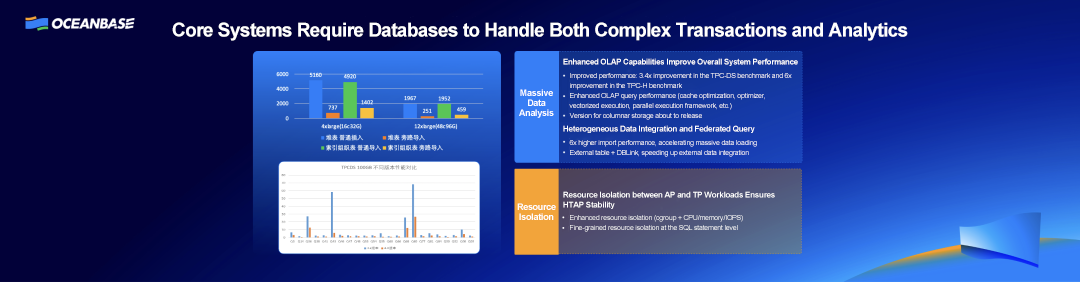
<style>
.page{position:relative;width:1080px;height:282px;background:#020139}
.page>*{position:absolute;margin:0}
.t1{font:19px "Arial-BoldMT";letter-spacing:-0.03em;color:#ffffff}
.t2{font:8px "Arial-BoldMT";letter-spacing:-0.03em;color:#ffffff}
.t3{font:7px/10px "ArialMT";letter-spacing:-0.03em}
.t4{font:9px/10px "Arial-BoldMT";letter-spacing:-0.03em;color:#ffffff}
.t5{font:8px/10px "Arial-BoldMT";letter-spacing:-0.03em;color:#ffffff}
</style>
<div class="page">
<p class="t1" style="left:172px;top:22px;width:736px;height:19px">Core Systems Require Databases to Handle Both Complex Transactions and Analytics</p>
<p class="t2" style="left:563px;top:58px;width:235px;height:8px">Enhanced OLAP Capabilities Improve Overall System Performance</p>
<p class="t3" style="left:569px;top:73px;width:223px;height:47px">Improved performance: 3.4x improvement in the TPC-DS benchmark and 6x improvement in the TPC-H benchmark<br>Enhanced OLAP query performance (cache optimization, optimizer, vectorized execution, parallel execution framework, etc.)<br>Version for columnar storage about to release</p>
<p class="t4" style="left:519px;top:89px;width:35px;height:29px;text-align:center">Massive Data Analysis</p>
<p class="t2" style="left:563px;top:125px;width:192px;height:8px">Heterogeneous Data Integration and Federated Query</p>
<p class="t3" style="left:569px;top:140px;width:188px;height:17px">6x higher import performance, accelerating massive data loading<br>External table + DBLink, speeding up external data integration</p>
<p class="t5" style="left:563px;top:191px;width:212px;height:18px">Resource Isolation between AP and TP Workloads Ensures <br>HTAP Stability</p>
<p class="t4" style="left:517px;top:203px;width:39px;height:17px;text-align:center">Resource Isolation</p>
<p class="t3" style="left:570px;top:215px;width:173px;height:17px">Enhanced resource isolation (cgroup + CPU/memory/IOPS)<br>Fine-grained resource isolation at the SQL statement level</p>
</div>
